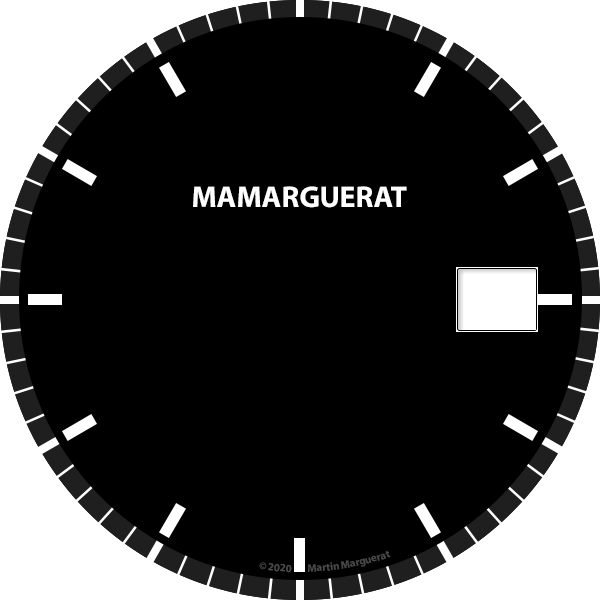
<style>
.page{position:relative;width:600px;height:600px;background:#000000}
.page>*{position:absolute;margin:0}
.t1{font:30px "MyriadPro-Bold";color:#ffffff}
</style>
<div class="page">
<p class="t1" style="left:193px;top:186px;width:214px;height:22px">MAMARGUERAT</p>
</div>
